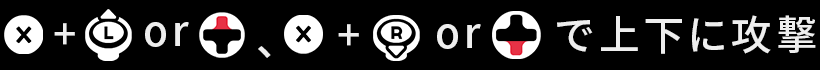
<style>
.page{position:relative;width:820px;height:70px;background:#000000}
.page>*{position:absolute;margin:0}
.t1{font:41px "SourceHanSansJP-Medium";letter-spacing:0.08em;color:#eeeeee}
</style>
<div class="page">
<p class="t1" style="left:557px;top:15px;width:259px;height:39px">で上下に攻撃</p>
<p class="t1" style="left:54px;top:23px;width:21px;height:22px">+</p>
<p class="t1" style="left:145px;top:22px;width:44px;height:25px">or</p>
<p class="t1" style="left:338px;top:24px;width:21px;height:22px">+</p>
<p class="t1" style="left:437px;top:24px;width:44px;height:25px">or</p>
<p class="t1" style="left:258px;top:46px;width:13px;height:12px">、</p>
</div>
